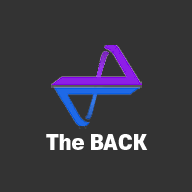
<style>
.page{position:relative;width:192px;height:192px;background:#333333}
.page>*{position:absolute;margin:0}
.t1{font:20px "S-CoreDream-9Black";color:#ffffff}
</style>
<div class="page">
<p class="t1" style="left:46px;top:134px;width:102px;height:16px">The BACK</p>
</div>
